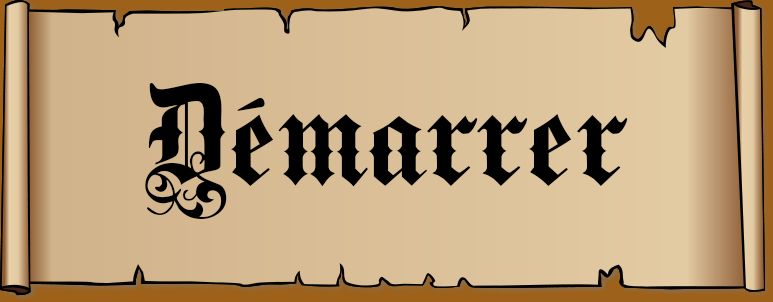
<style>
.page{position:relative;width:773px;height:302px}
.page>*{position:absolute;margin:0}
.t1{font:140px "MediciText";color:#000000}
</style>
<div class="page">
<p class="t1" style="left:145px;top:83px;width:483px;height:136px">Démarrer</p>
</div>
